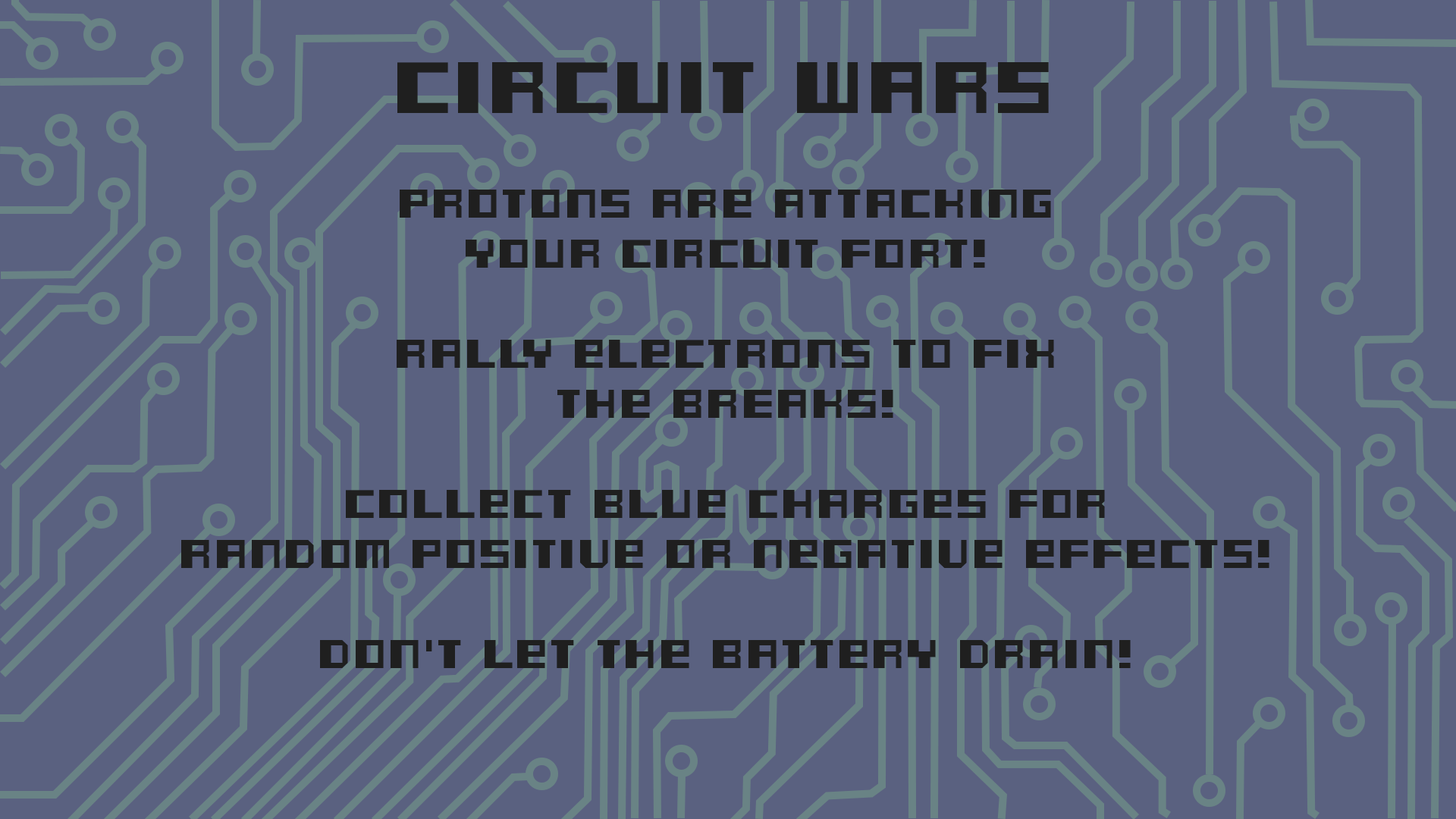
<style>
.page{position:relative;width:1456px;height:819px;background:#5a6180}
.page>*{position:absolute;margin:0}
.t1{font:41.7px "Dusty";letter-spacing:0.02em;color:#1f1f1f}
.t2{font:75.8px "Dusty";letter-spacing:0.02em;color:#1f1f1f}
</style>
<div class="page">
<p class="t1" style="left:181px;top:62px;width:1088px;height:606px;text-align:center"><span class="t2">CIRCUIT WARS<br><br></span>PROTOnS ARe ATTACKInG<br>YOUR CIRCUIT FORT!<br><br>RALLY eLeCTROns TO FIx<br>THe BREAKS!<br><br>COLLecT BLue cHARGeS FoR<br>RAnDoM POSITIVe OR neGATIVe effecTs!<br><br>DOn'T LeT THe BATTeRY DRAIn!</p>
</div>
